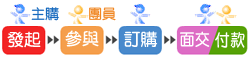
<style>
.page{position:relative;width:250px;height:60px;background:#ffffff}
.page>*{position:absolute;margin:0}
.t1{font:17px "DFYuan-Md-HK-BF";color:#ffffff}
.t2{font:17px "DFYuan-Md-HK-BF";color:#ffffff;scale:0.9 1}
</style>
<div class="page">
<p class="t1" style="left:65px;top:30px;width:34px;height:17px">參與</p>
<p class="t1" style="left:7px;top:31px;width:34px;height:17px">發起</p>
<p class="t1" style="left:124px;top:31px;width:34px;height:16px">訂購</p>
<p class="t2" style="left:180px;top:31px;width:30px;height:16px">面交</p>
<p class="t2" style="left:215px;top:31px;width:30px;height:17px">付款</p>
</div>
